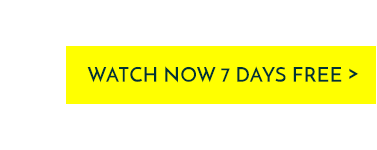
<style>
.page{position:relative;width:377px;height:150px;background:#ffffff}
.page>*{position:absolute;margin:0}
.t1{font:20.2px "JosefinSans-SemiBold";letter-spacing:0.025em;color:#003333}
</style>
<div class="page">
<p class="t1" style="left:87px;top:66px;width:272px;height:17px">WATCH NOW 7 DAYS FREE &gt;</p>
</div>
